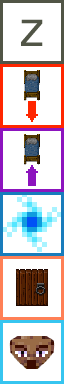
<style>
.page{position:relative;width:64px;height:384px;background:#ffffff}
.page>*{position:absolute;margin:0}
.t1{font:48px "DejaVuSans";color:#515546}
</style>
<div class="page">
<p class="t1" style="left:21px;top:19px;width:22px;height:27px">z</p>
</div>
